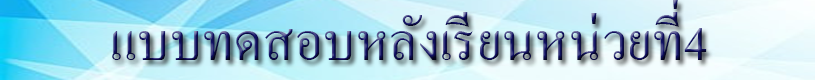
<style>
.page{position:relative;width:815px;height:80px}
.page>*{position:absolute;margin:0}
.t1{font:72px "AngsanaNew"}
</style>
<div class="page">
<p class="t1" style="left:112px;top:0px;width:595px;height:60px">แบบทดสอบหลังเรียนหน่วยที่4</p>
</div>
